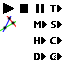
<style>
.page{position:relative;width:64px;height:64px;background:#ffffff}
.page>*{position:absolute;margin:0}
.t1{font:9px "SegoeUI";letter-spacing:0.07em;color:#000000;font-weight:bold}
</style>
<div class="page">
<p class="t1" style="left:50px;top:5px;width:6px;height:7px">T</p>
<p class="t1" style="left:51px;top:21px;width:5px;height:7px">S</p>
<p class="t1" style="left:34px;top:37px;width:6px;height:7px">H</p>
<p class="t1" style="left:50px;top:37px;width:6px;height:7px">C</p>
<p class="t1" style="left:34px;top:53px;width:6px;height:7px">D</p>
<p class="t1" style="left:50px;top:53px;width:6px;height:7px">C</p>
</div>
